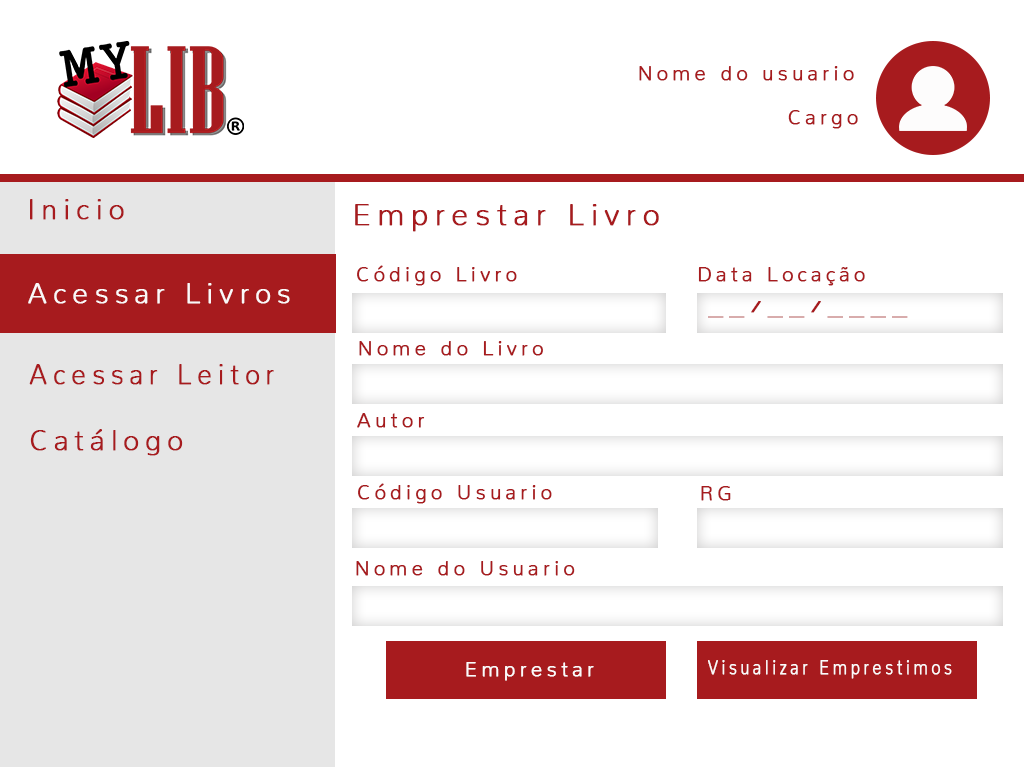
<style>
.page{position:relative;width:1024px;height:768px;background:#ffffff}
.page>*{position:absolute;margin:0}
.t1{font:20px "Nunito-ExtraLight";letter-spacing:0.2em;color:#a71b1e;font-weight:bold}
.t2{font:28px "Nunito-ExtraLight";letter-spacing:0.2em;color:#a71b1e;font-weight:bold}
.t3{font:30px "Nunito-ExtraLight";letter-spacing:0.2em;color:#a71b1e;font-weight:bold}
.t4{font:28px "Nunito-ExtraLight";letter-spacing:0.2em;color:#fbf9f9;font-weight:bold}
.t5{font:20px "Nunito-ExtraLight";letter-spacing:0.2em;color:#a71b1e;font-weight:bold;scale:1.47 1}
.t6{font:28px "Nunito-ExtraLight";letter-spacing:0.2em;color:#a71b1e;font-weight:bold;scale:0.94 1}
.t7{font:20px "Nunito-ExtraLight";letter-spacing:0.2em;color:#fcfbfb;font-weight:bold}
.t8{font:20px "Nunito-ExtraLight";letter-spacing:0.2em;color:#fcfbfb;font-weight:bold;scale:0.8 1}
</style>
<div class="page">
<p class="t1" style="left:639px;top:66px;width:215px;height:15px">Nome do usuario</p>
<p class="t1" style="left:788px;top:110px;width:70px;height:19px">Cargo</p>
<p class="t2" style="left:30px;top:199px;width:94px;height:21px">Inicio</p>
<p class="t3" style="left:355px;top:204px;width:304px;height:28px">Emprestar Livro</p>
<p class="t1" style="left:357px;top:265px;width:160px;height:21px">Código Livro</p>
<p class="t1" style="left:698px;top:267px;width:167px;height:19px">Data Locação</p>
<p class="t4" style="left:28px;top:283px;width:262px;height:21px">Acessar Livros</p>
<p class="t5" style="left:708px;top:301px;width:200px;height:17px">__/__/____</p>
<p class="t1" style="left:359px;top:341px;width:184px;height:15px">Nome do Livro</p>
<p class="t6" style="left:29px;top:364px;width:245px;height:21px">Acessar Leitor</p>
<p class="t1" style="left:357px;top:413px;width:68px;height:15px">Autor</p>
<p class="t2" style="left:30px;top:429px;width:153px;height:27px">Catálogo</p>
<p class="t1" style="left:358px;top:483px;width:194px;height:21px">Código Usuario</p>
<p class="t1" style="left:701px;top:486px;width:30px;height:15px">RG</p>
<p class="t1" style="left:356px;top:561px;width:219px;height:15px">Nome do Usuario</p>
<p class="t7" style="left:466px;top:662px;width:128px;height:19px">Emprestar</p>
<p class="t8" style="left:708px;top:660px;width:244px;height:19px">Visualizar Emprestimos</p>
</div>
